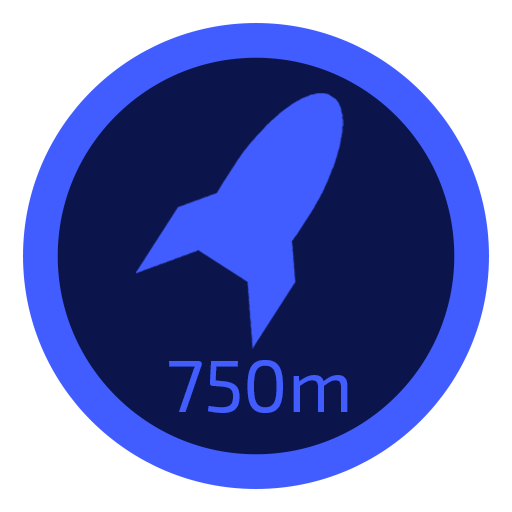
<style>
.page{position:relative;width:512px;height:512px;background:#0c154b}
.page>*{position:absolute;margin:0}
.t1{font:74.2px "Exo2-Regular";color:#425dff}
</style>
<div class="page">
<p class="t1" style="left:169px;top:360px;width:179px;height:53px">750m</p>
</div>
